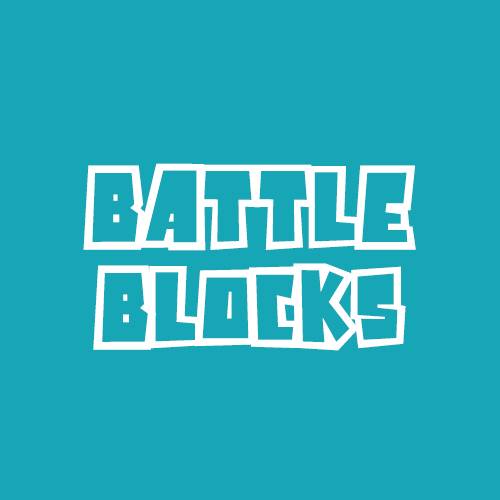
<style>
.page{position:relative;width:500px;height:500px;background:#16a6b6}
.page>*{position:absolute;margin:0}
.t1{font:50px/100px "Powerful";color:#ffffff}
</style>
<div class="page">
<p class="t1" style="left:83px;top:163px;width:333px;height:188px;text-align:center">BATTLE<br>BLOCKS</p>
</div>
